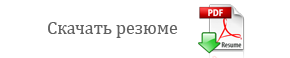
<style>
.page{position:relative;width:290px;height:58px;background:#ffffff}
.page>*{position:absolute;margin:0}
.t1{font:18px "Cambria";color:#616161}
</style>
<div class="page">
<p class="t1" style="left:48px;top:22px;width:130px;height:16px">Скачать резюме</p>
</div>
